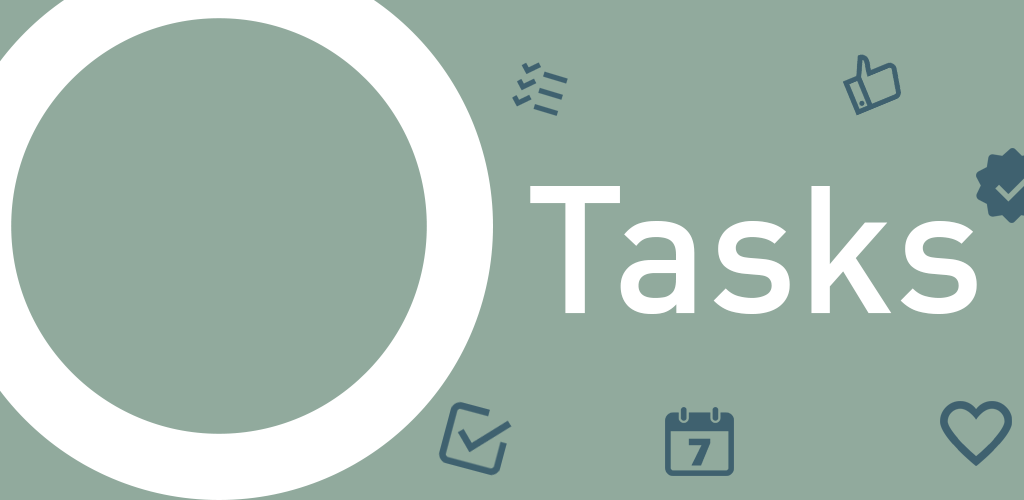
<style>
.page{position:relative;width:1024px;height:500px;background:#91aa9d}
.page>*{position:absolute;margin:0}
.t1{font:178.7px "DIN-Medium";color:#ffffff}
</style>
<div class="page">
<p class="t1" style="left:530px;top:186px;width:447px;height:128px">Tasks</p>
</div>
